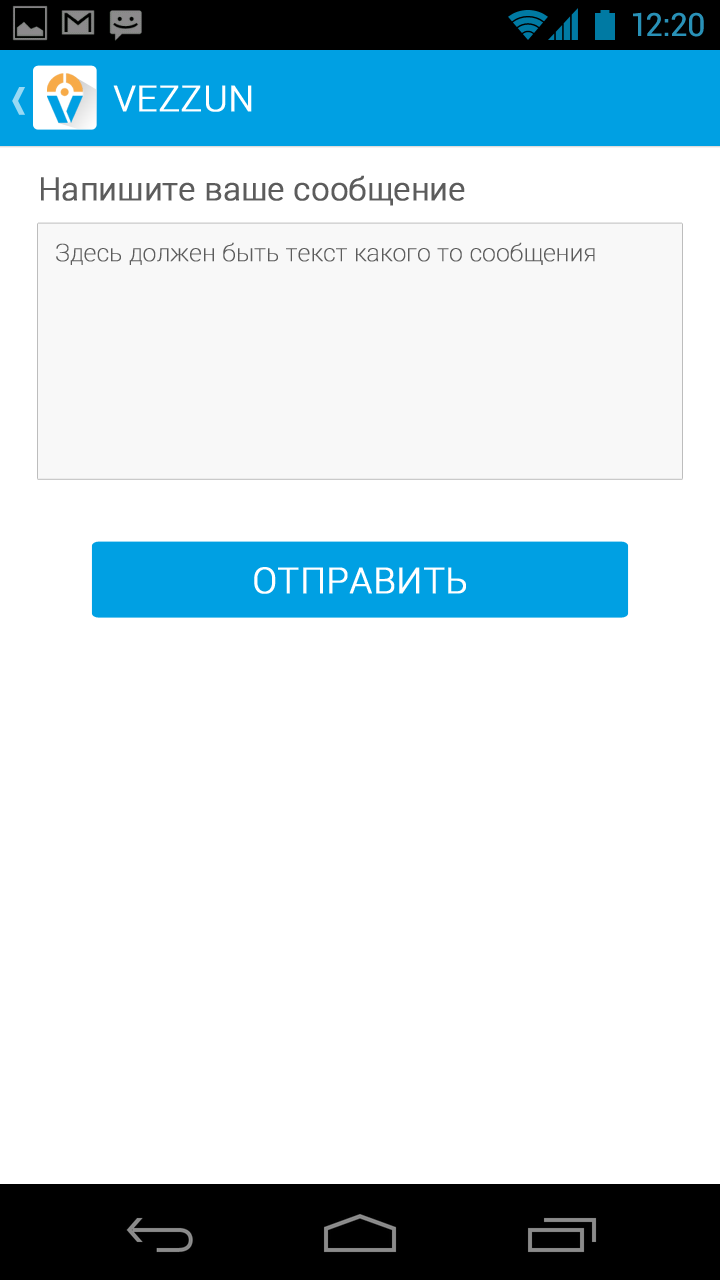
<style>
.page{position:relative;width:720px;height:1280px;background:#ffffff}
.page>*{position:absolute;margin:0}
.t1{font:32px "Roboto-Regular";color:#2991b7}
.t2{font:36px "Roboto-Light";color:#ffffff;text-transform:uppercase;font-weight:bold}
.t3{font:32px "Roboto-Light";color:#5c5c5c;font-weight:bold}
.t4{font:24px "Roboto-Thin";color:#5c5c5c;font-weight:bold}
.t5{font:36px "Roboto-Light";color:#ffffff;font-weight:bold}
</style>
<div class="page">
<p class="t1" style="left:633px;top:12px;width:71px;height:25px">12:20</p>
<p class="t2" style="left:113px;top:85px;width:139px;height:27px">Vezzun</p>
<p class="t3" style="left:41px;top:175px;width:424px;height:31px">Напишите ваше сообщение</p>
<p class="t4" style="left:56px;top:242px;width:539px;height:23px">Здесь должен быть текст какого то сообщения</p>
<p class="t5" style="left:254px;top:567px;width:212px;height:27px">ОТПРАВИТЬ</p>
</div>
